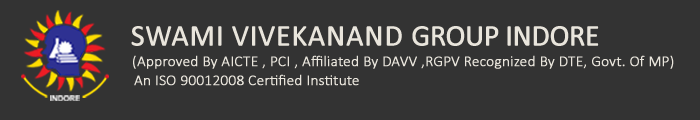
<style>
.page{position:relative;width:700px;height:120px;background:#333333}
.page>*{position:absolute;margin:0}
.t1{font:30px "Calibri";color:#e9e5dc;text-transform:uppercase;font-weight:bold}
.t2{font:26px "Geometric706BT-BlackCondensedB";color:#e9e5dc;font-weight:bold}
.t3{font:30px "Calibri";letter-spacing:-0.04em;color:#e9e5dc;text-transform:uppercase;font-weight:bold}
.t4{font:15px "Calibri-Light";color:#e9e5dc;font-weight:bold}
</style>
<div class="page">
<p class="t1" style="left:131px;top:26px;width:468px;height:20px"><span class="t2"> </span>Swami Vivekanand <span class="t3">Group Indore</span></p>
<p class="t4" style="left:133px;top:55px;width:541px;height:14px">(Approved By AICTE , PCI , Affiliated By DAVV ,RGPV Recognized By DTE, Govt. Of MP)</p>
<p class="t4" style="left:134px;top:74px;width:225px;height:12px">An ISO 90012008 Certified Institute</p>
</div>
